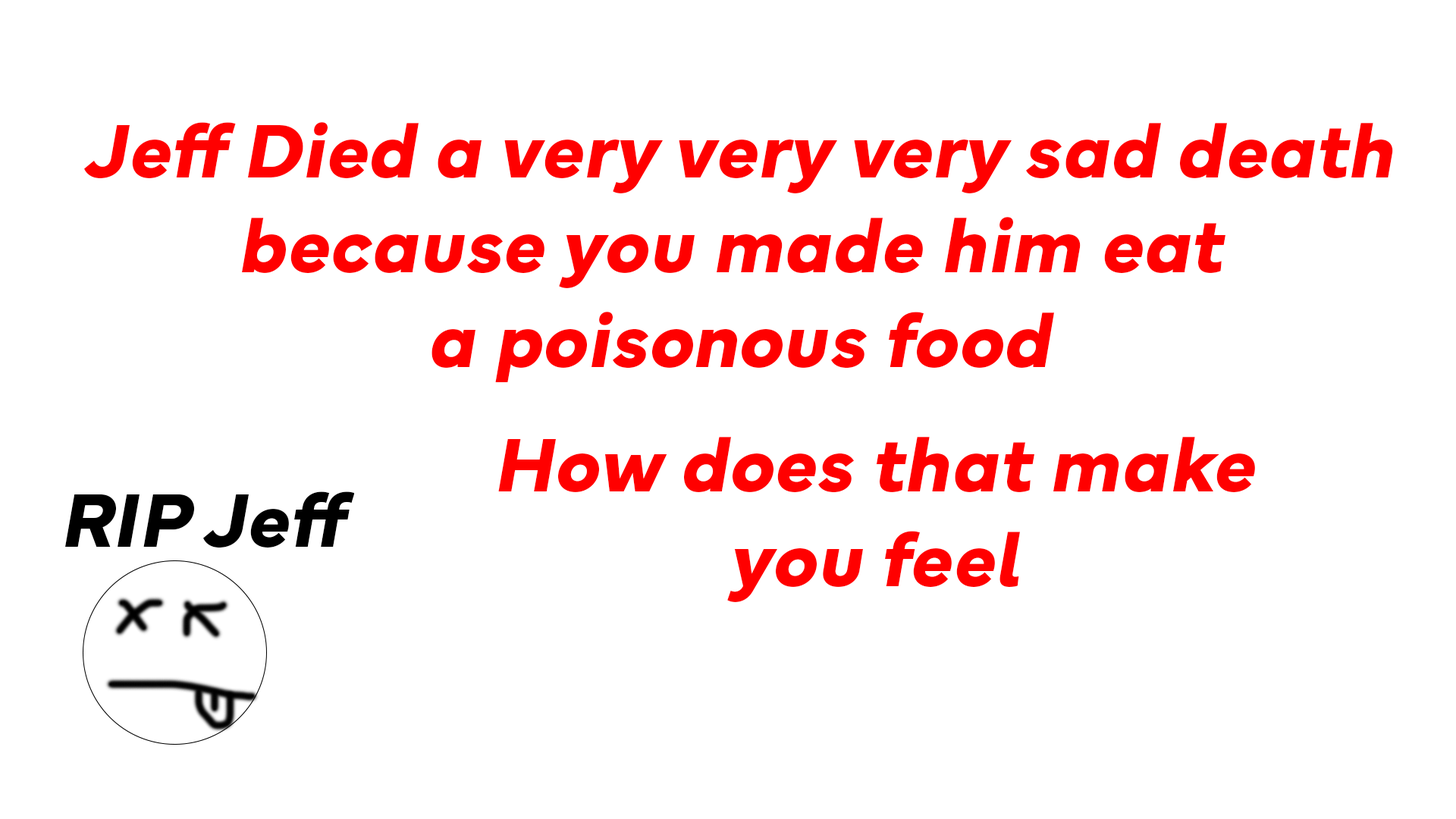
<style>
.page{position:relative;width:1456px;height:819px;background:#ffffff}
.page>*{position:absolute;margin:0}
.t1{font:79px "Mundial-BoldItalic";color:#ff0000}
.t2{font:79px "Mundial-BoldItalic";color:#000000}
</style>
<div class="page">
<p class="t1" style="left:84px;top:122px;width:1309px;height:260px;text-align:center">Jeff Died a very very very sad death<br>because you made him eat <br>a poisonous food</p>
<p class="t1" style="left:498px;top:437px;width:757px;height:165px;text-align:center">How does that make<br>you feel</p>
<p class="t2" style="left:65px;top:491px;width:289px;height:57px">RIP Jeff</p>
</div>
